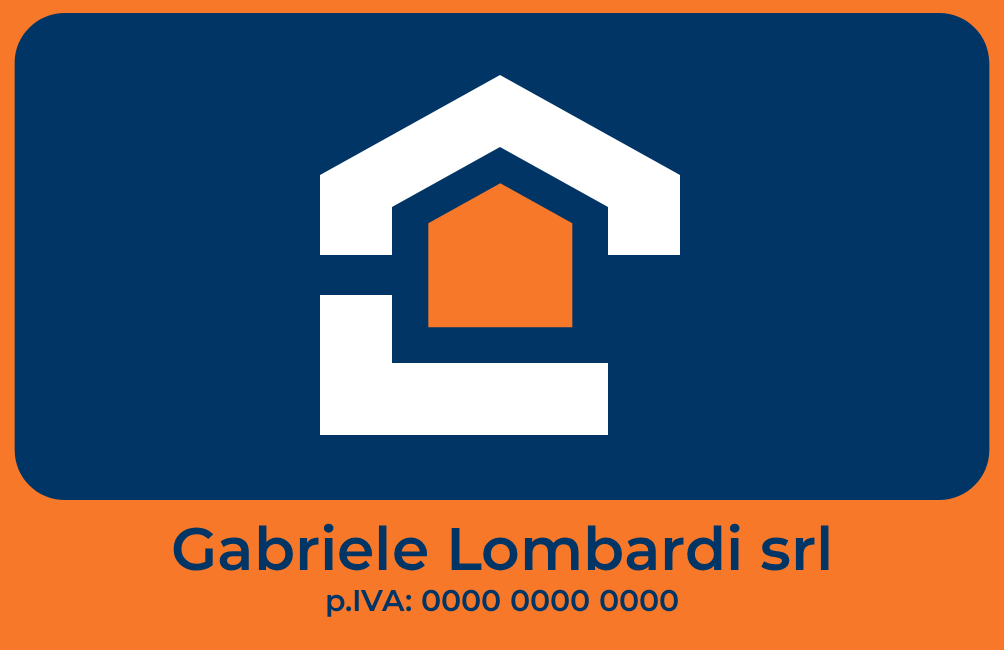
<style>
.page{position:relative;width:1004px;height:650px;background:#003566}
.page>*{position:absolute;margin:0}
.t1{font:60px "Montserrat-SemiBold";color:#003566}
.t2{font:30px "Montserrat-SemiBold";color:#003566}
</style>
<div class="page">
<p class="t1" style="left:173px;top:523px;width:656px;height:48px">Gabriele Lombardi srl</p>
<p class="t2" style="left:327px;top:589px;width:351px;height:28px">p.IVA: 0000 0000 0000</p>
</div>
